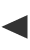
<style>
.page{position:relative;width:30px;height:50px;background:#ffffff}
.page>*{position:absolute;margin:0}
.t1{font:40px "Menlo-Bold";letter-spacing:0.007em;color:#333333;scale:1.1 1}
</style>
<div class="page">
<p class="t1" style="left:1px;top:15px;width:27px;height:24px">◀</p>
</div>
